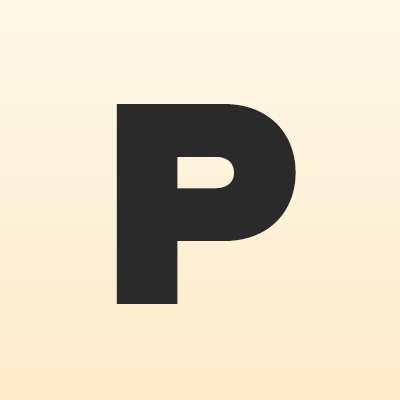
<style>
.page{position:relative;width:400px;height:400px}
.page>*{position:absolute;margin:0}
.t1{font:300px "ProximaNova-Black";letter-spacing:0.08em;color:#2a2a2a}
</style>
<div class="page">
<p class="t1" style="left:116px;top:104px;width:180px;height:200px">P</p>
</div>
